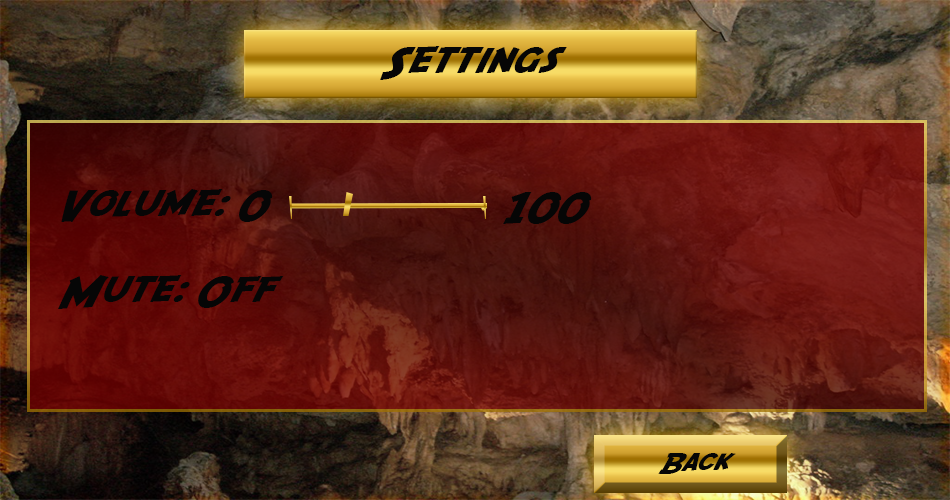
<style>
.page{position:relative;width:950px;height:500px}
.page>*{position:absolute;margin:0}
.t1{font:36px "SFFedora";letter-spacing:-0.005em;color:#060606;scale:1.2 1}
.t2{font:24px "SFFedora";letter-spacing:-0.005em;color:#060606;scale:1.2 1}
</style>
<div class="page">
<p class="t1" style="left:380px;top:46px;width:187px;height:34px">Settings</p>
<p class="t1" style="left:58px;top:189px;width:226px;height:120px">Volume: 0<br><br>Mute: Off</p>
<p class="t1" style="left:503px;top:192px;width:89px;height:32px">100</p>
<p class="t2" style="left:658px;top:453px;width:78px;height:21px">Back</p>
</div>
